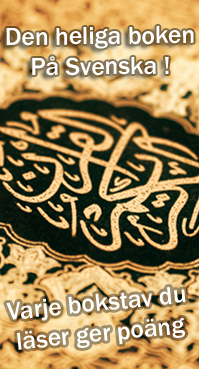
<style>
.page{position:relative;width:199px;height:369px}
.page>*{position:absolute;margin:0}
.t1{font:25.4px "FranklinGothic-Medium";color:#ffffff}
</style>
<div class="page">
<p class="t1" style="left:6px;top:26px;width:188px;height:50px;text-align:center;rotate:-1deg">Den heliga boken<br>På Svenska !</p>
<p class="t1" style="left:6px;top:287px;width:180px;height:63px;text-align:center;rotate:-6deg">Varje bokstav du<br>läser ger poäng</p>
</div>
